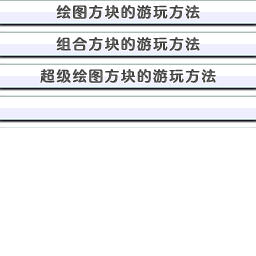
<style>
.page{position:relative;width:256px;height:256px;background:#ffffff}
.page>*{position:absolute;margin:0}
.t1{font:14.4px "FZFW-QingYinTiS-B--GB1-0";letter-spacing:0.1em;color:#3d3e3d}
</style>
<div class="page">
<p class="t1" style="left:56px;top:5px;width:144px;height:14px">绘图方块的游玩方法</p>
<p class="t1" style="left:56px;top:37px;width:144px;height:14px">组合方块的游玩方法</p>
<p class="t1" style="left:40px;top:69px;width:176px;height:14px">超级绘图方块的游玩方法</p>
</div>
